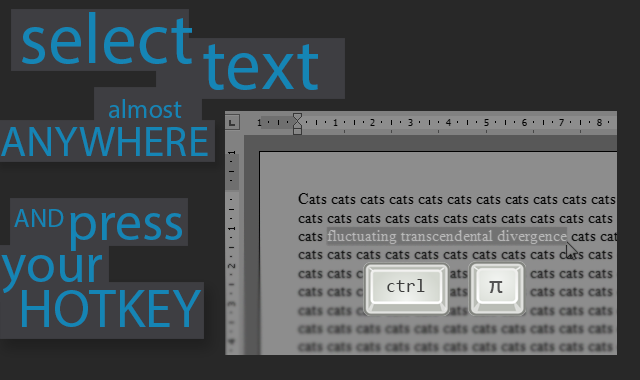
<style>
.page{position:relative;width:640px;height:380px;background:#282828}
.page>*{position:absolute;margin:0}
.t1{font:72px "MyriadPro-Regular";color:#1585b5}
.t2{font:26px "MyriadPro-Regular";color:#1585b5}
.t3{font:43px "MyriadPro-Regular";color:#1585b5}
.t4{font:54px "MyriadPro-Regular";color:#1585b5}
.t5{font:18px "Consolas";color:#3d3d3d}
.t6{font:25.3px "Consolas";letter-spacing:0.02em;color:#535353}
</style>
<div class="page">
<p class="t1" style="left:22px;top:12px;width:170px;height:52px">select</p>
<p class="t1" style="left:203px;top:44px;width:115px;height:46px">text</p>
<p class="t2" style="left:109px;top:99px;width:73px;height:19px">almost</p>
<p class="t3" style="left:1px;top:127px;width:207px;height:29px">ANYWHERE</p>
<p class="t2" style="left:14px;top:209px;width:50px;height:18px">AND</p>
<p class="t4" style="left:70px;top:213px;width:112px;height:38px">press</p>
<p class="t4" style="left:1px;top:255px;width:101px;height:38px">your</p>
<p class="t5" style="left:387px;top:279px;width:38px;height:13px">ctrl</p>
<p class="t6" style="left:489px;top:281px;width:14px;height:12px">π</p>
<p class="t4" style="left:22px;top:290px;width:180px;height:37px">HOTKEY</p>
</div>
